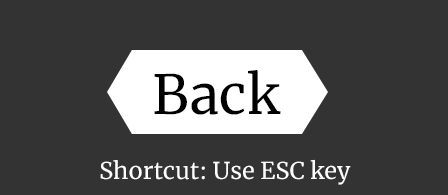
<style>
.page{position:relative;width:448px;height:195px;background:#333333}
.page>*{position:absolute;margin:0}
.t1{font:53.8px "Merriweather-Regular";color:#000000}
.t2{font:23.2px "Merriweather-Regular";color:#ffffff}
</style>
<div class="page">
<p class="t1" style="left:154px;top:70px;width:127px;height:45px">Back</p>
<p class="t2" style="left:100px;top:159px;width:251px;height:26px">Shortcut: Use ESC key</p>
</div>
